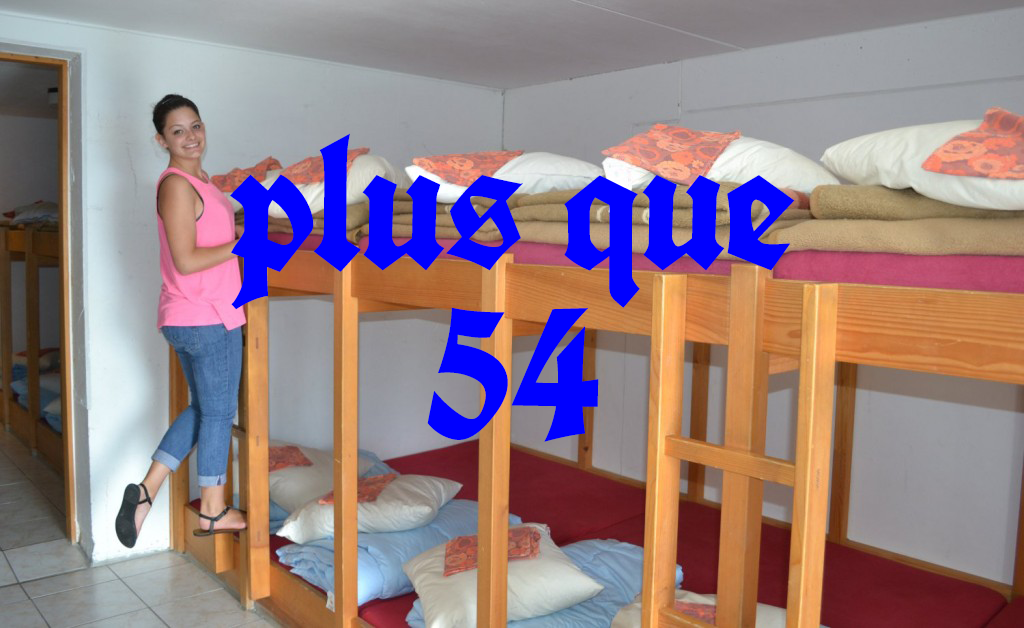
<style>
.page{position:relative;width:1024px;height:628px}
.page>*{position:absolute;margin:0}
.t1{font:185.4px/168.5px "UnifrakturCook-Bold";letter-spacing:-0.02em;color:#0000ff}
</style>
<div class="page">
<p class="t1" style="left:230px;top:133px;width:565px;height:309px;text-align:center">plus que<br>54</p>
</div>
